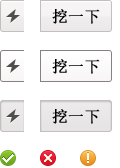
<style>
.page{position:relative;width:120px;height:168px;background:#ffffff}
.page>*{position:absolute;margin:0}
.t1{font:16px "SimSun";letter-spacing:0.025em;color:#000000;font-weight:bold;scale:0.96 1}
</style>
<div class="page">
<p class="t1" style="left:52px;top:9px;width:48px;height:15px">挖一下</p>
<p class="t1" style="left:52px;top:59px;width:48px;height:15px">挖一下</p>
<p class="t1" style="left:52px;top:109px;width:48px;height:15px">挖一下</p>
</div>
